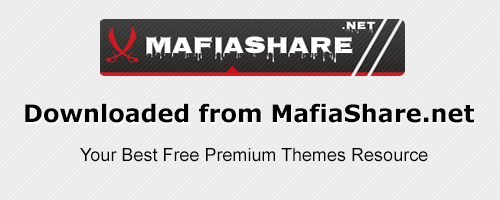
<style>
.page{position:relative;width:500px;height:200px;background:#ebebeb}
.page>*{position:absolute;margin:0}
.t1{font:24px "Verdana-Bold";color:#000000}
.t2{font:18px "ArialMT";color:#000000}
</style>
<div class="page">
<p class="t1" style="left:25px;top:103px;width:449px;height:20px">Downloaded from MafiaShare.net</p>
<p class="t2" style="left:80px;top:148px;width:348px;height:14px">Your Best Free Premium Themes Resource</p>
</div>
